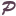
<style>
.page{position:relative;width:16px;height:16px;background:#ffffff}
.page>*{position:absolute;margin:0}
.t1{font:18px "BrushScriptStd";color:#5b3f51}
</style>
<div class="page">
<p class="t1" style="left:2px;top:1px;width:14px;height:14px">P</p>
</div>
